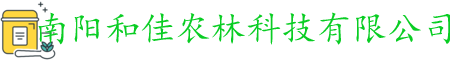
<style>
.page{position:relative;width:450px;height:60px;background:#ffffff}
.page>*{position:absolute;margin:0}
.t1{font:35.3px "KaiTi";color:#09cd23}
</style>
<div class="page">
<p class="t1" style="left:38px;top:12px;width:414px;height:33px">南阳和佳农林科技有限公司</p>
</div>
